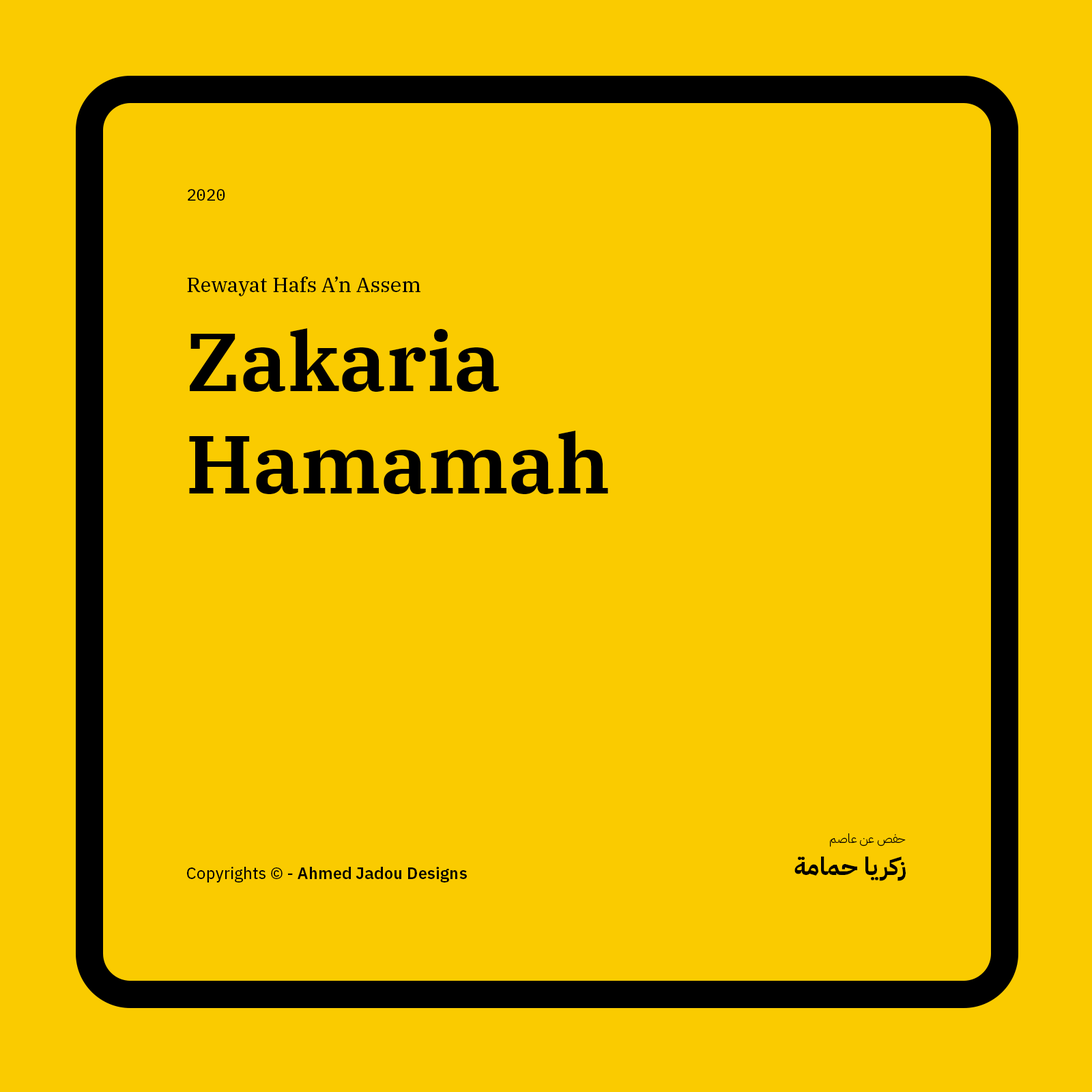
<style>
.page{position:relative;width:1092px;height:1092px;background:#facb00}
.page>*{position:absolute;margin:0}
.t1{font:16.4px "IBMPlexMono-Text";color:#000000}
.t2{font:20.5px "IBMPlexSerif-Text";color:#000000}
.t3{font:81.9px/102.7px "IBMPlexSerif-SemiBold";color:#000000}
.t4{font:12.3px "IBMPlexArabic-Light";color:#000000}
.t5{font:24.6px "IBMPlexArabic-Bold";color:#000000}
.t6{font:16.4px "IBMPlexSans-SemiBold";color:#000000}
.t7{font:16.4px "IBMPlexSans-Text";color:#000000}
</style>
<div class="page">
<p class="t1" style="left:188px;top:189px;width:37px;height:12px">2020</p>
<p class="t2" style="left:187px;top:276px;width:233px;height:20px">Rewayat Hafs A’n Assem</p>
<p class="t3" style="left:189px;top:328px;width:419px;height:166px">Zakaria Hamamah</p>
<p class="t4" style="left:830px;top:833px;width:76px;height:14px">حفص عن عاصم</p>
<p class="t5" style="left:794px;top:857px;width:112px;height:24px">زكريا حمامة</p>
<p class="t6" style="left:187px;top:867px;width:280px;height:15px"><span class="t7">Copyrights © - </span>Ahmed Jadou Designs</p>
</div>
